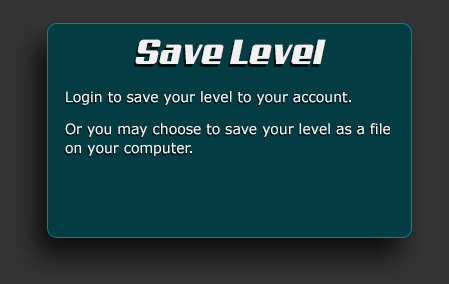
<style>
.page{position:relative;width:449px;height:284px;background:#033c43}
.page>*{position:absolute;margin:0}
.t1{font:35px "Aero";color:#f1f1f1}
.t2{font:14px/19px "Verdana";color:#ffffff}
</style>
<div class="page">
<p class="t1" style="left:135px;top:39px;width:191px;height:25px">Save Level</p>
<p class="t2" style="left:65px;top:91px;width:325px;height:65px">Login to save your level to your account.<br><br>Or you may choose to save your level as a file on your computer.</p>
</div>
